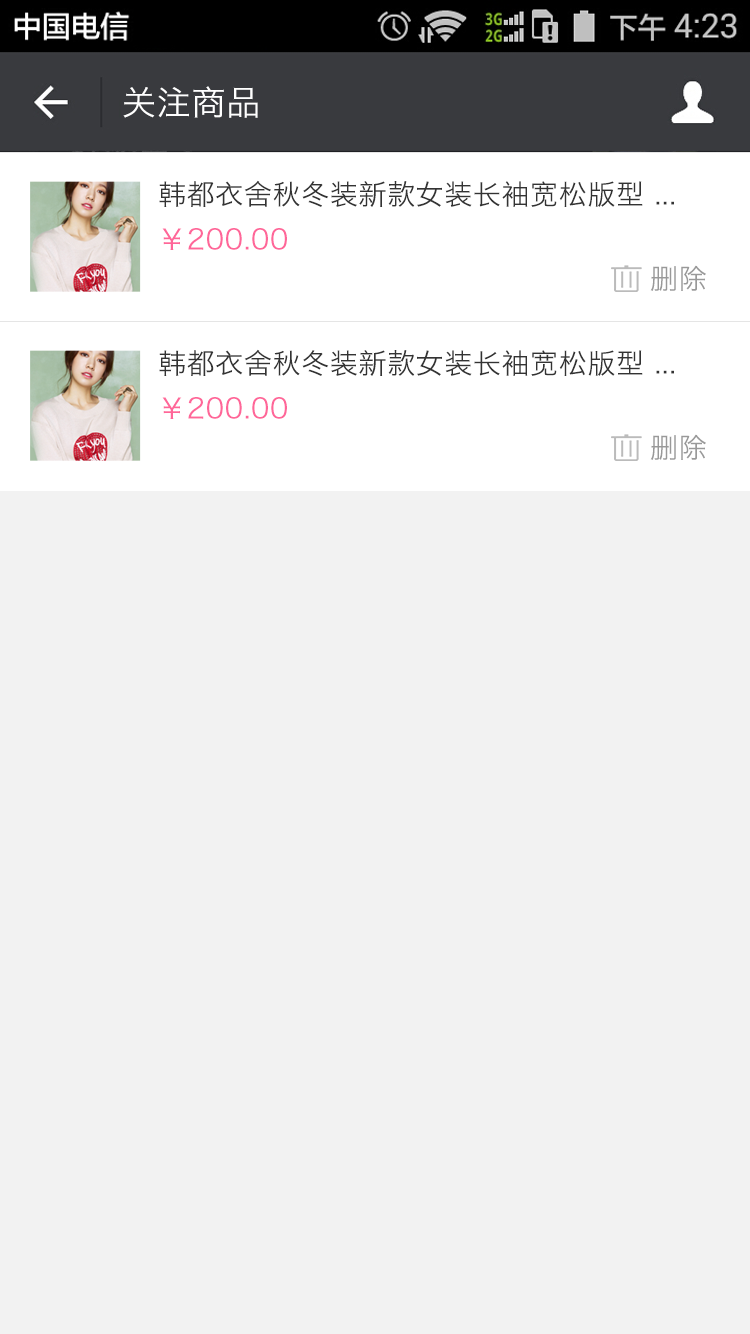
<style>
.page{position:relative;width:750px;height:1334px;background:#f2f2f2}
.page>*{position:absolute;margin:0}
.t1{font:34px "HiraginoSansGB-W3";letter-spacing:0.022em;color:#ffffff}
.t2{font:28px "HiraginoSansGB-W3";letter-spacing:0.022em;color:#333333}
.t3{font:28px "HiraginoSansGB-W3";letter-spacing:0.022em;color:#ff6699}
.t4{font:28px "HiraginoSansGB-W3";letter-spacing:0.02em;color:#999999}
</style>
<div class="page">
<p class="t1" style="left:123px;top:86px;width:135px;height:32px">关注商品</p>
<p class="t2" style="left:159px;top:180px;width:515px;height:27px">韩都衣舍秋冬装新款女装长袖宽松版型 ...</p>
<p class="t3" style="left:162px;top:228px;width:125px;height:22px">￥200.00</p>
<p class="t4" style="left:650px;top:265px;width:56px;height:26px">删除</p>
<p class="t2" style="left:159px;top:349px;width:515px;height:27px">韩都衣舍秋冬装新款女装长袖宽松版型 ...</p>
<p class="t3" style="left:162px;top:397px;width:125px;height:22px">￥200.00</p>
<p class="t4" style="left:650px;top:434px;width:56px;height:26px">删除</p>
</div>
